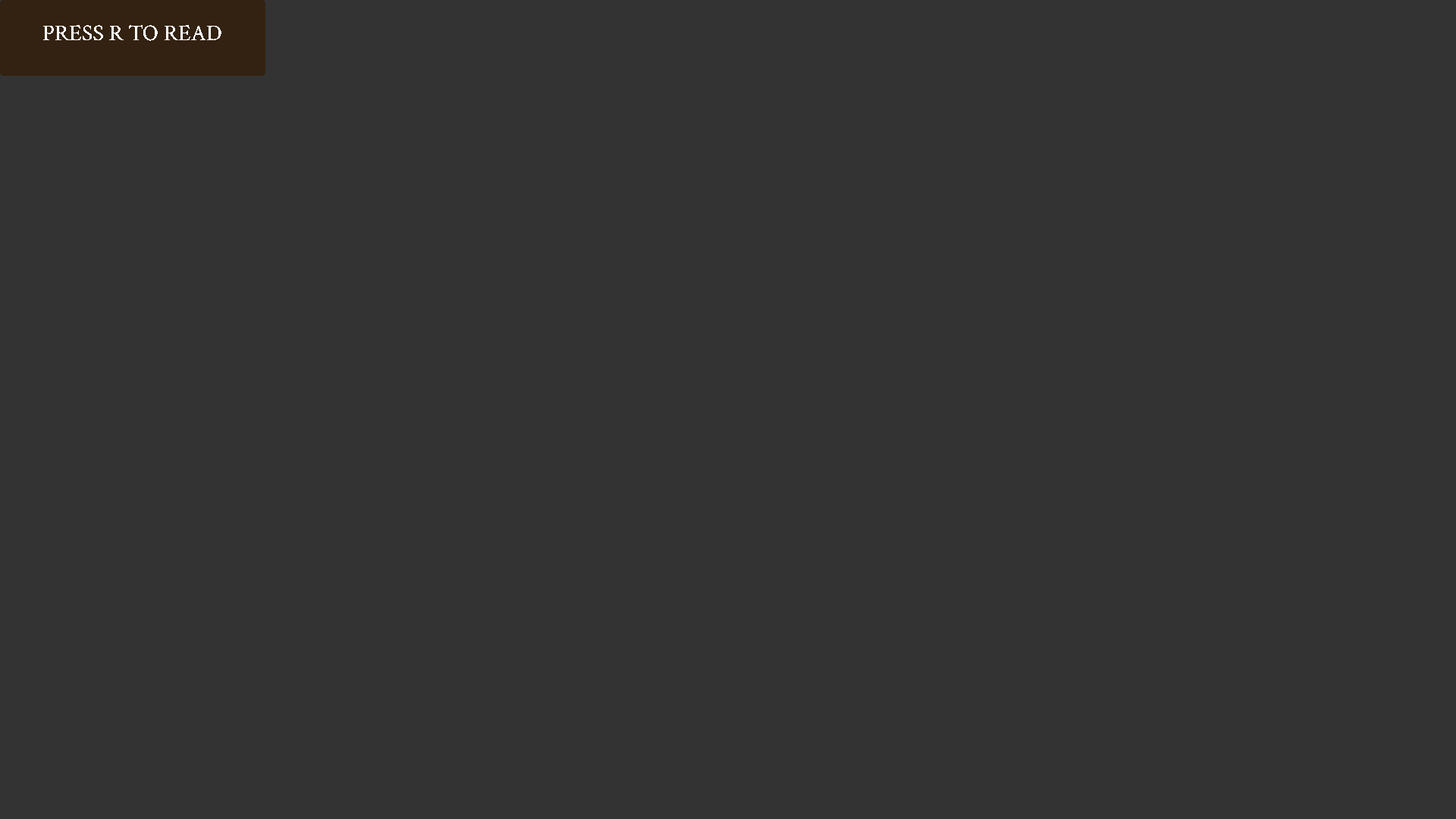
<style>
.page{position:relative;width:1456px;height:819px;background:#333333}
.page>*{position:absolute;margin:0}
.t1{font:22.7px "CrimsonText-Regular";color:#ffffff}
</style>
<div class="page">
<p class="t1" style="left:43px;top:25px;width:178px;height:16px">PRESS R TO READ</p>
</div>
